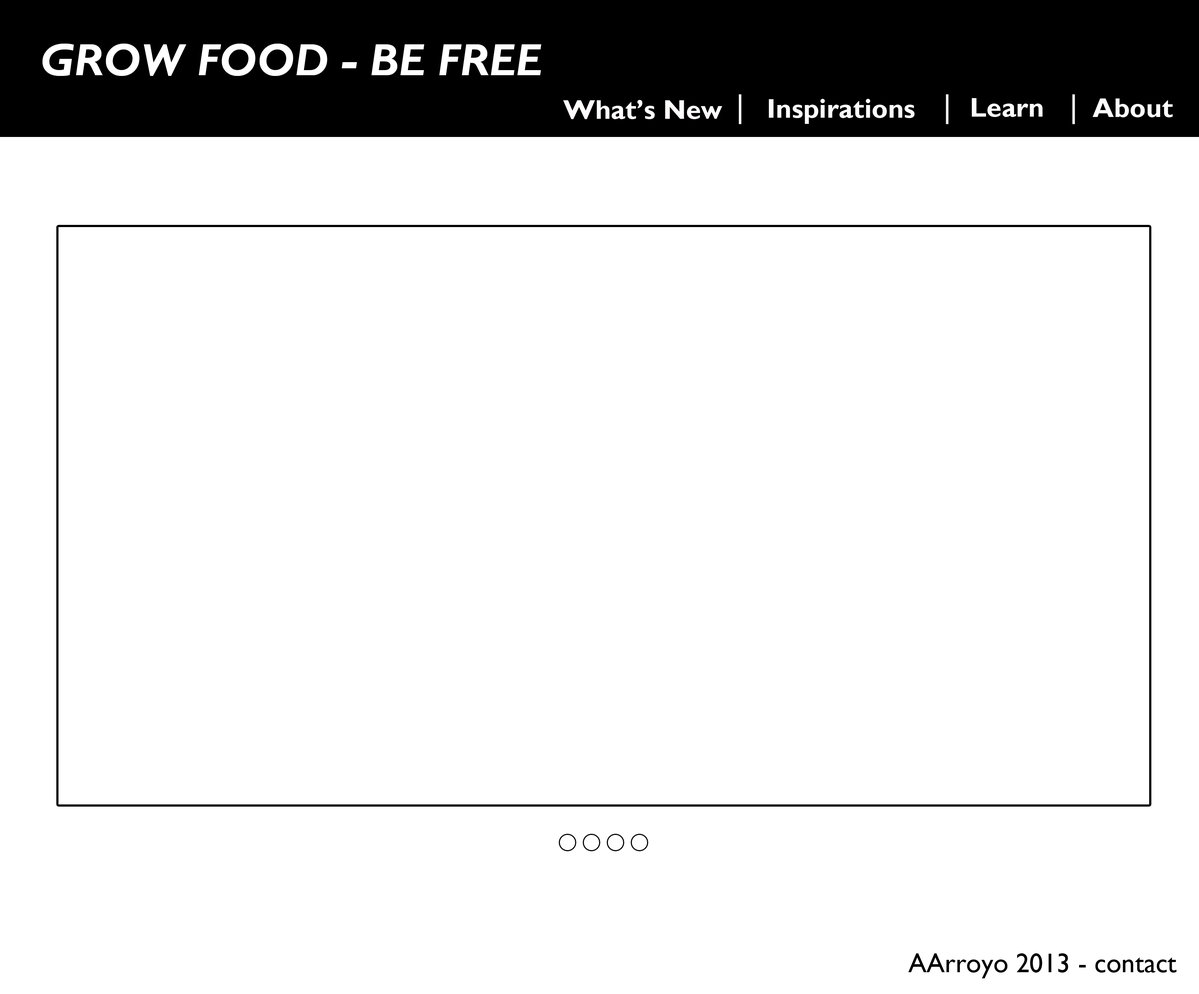
<style>
.page{position:relative;width:1199px;height:994px;background:#ffffff}
.page>*{position:absolute;margin:0}
.t1{font:45.4px "GillSansMT-BoldItalic";color:#ffffff}
.t2{font:27.3px "GillSansMT-Bold";color:#fffcfc}
.t3{font:27.3px "GillSansMT-Bold";color:#fcfcfc}
.t4{font:27.3px "GillSansMT-Bold";color:#fdfdfd}
.t5{font:27.3px "GillSansMT";color:#000000}
</style>
<div class="page">
<p class="t1" style="left:43px;top:44px;width:498px;height:32px">GROW FOOD - BE FREE</p>
<p class="t2" style="left:563px;top:100px;width:159px;height:19px">What’s New</p>
<p class="t3" style="left:769px;top:99px;width:146px;height:25px">Inspirations</p>
<p class="t4" style="left:972px;top:98px;width:71px;height:19px">Learn</p>
<p class="t4" style="left:1093px;top:98px;width:80px;height:19px">About</p>
<p class="t5" style="left:909px;top:954px;width:268px;height:25px">AArroyo 2013 - contact</p>
</div>
